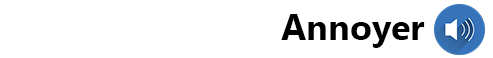
<style>
.page{position:relative;width:493px;height:58px;background:#ffffff}
.page>*{position:absolute;margin:0}
.t1{font:36px "SegoeUI-Bold";color:#000000}
</style>
<div class="page">
<p class="t1" style="left:281px;top:14px;width:144px;height:34px">Annoyer</p>
</div>
